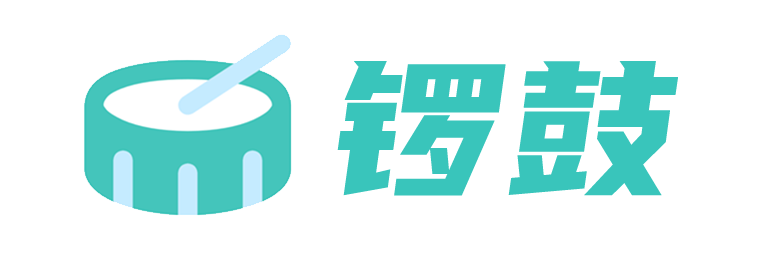
<style>
.page{position:relative;width:768px;height:256px;background:#ffffff}
.page>*{position:absolute;margin:0}
.t1{font:186.7px "YouSheBiaoTiHei";color:#39c5bb}
</style>
<div class="page">
<p class="t1" style="left:337px;top:61px;width:341px;height:135px">锣鼓</p>
</div>
